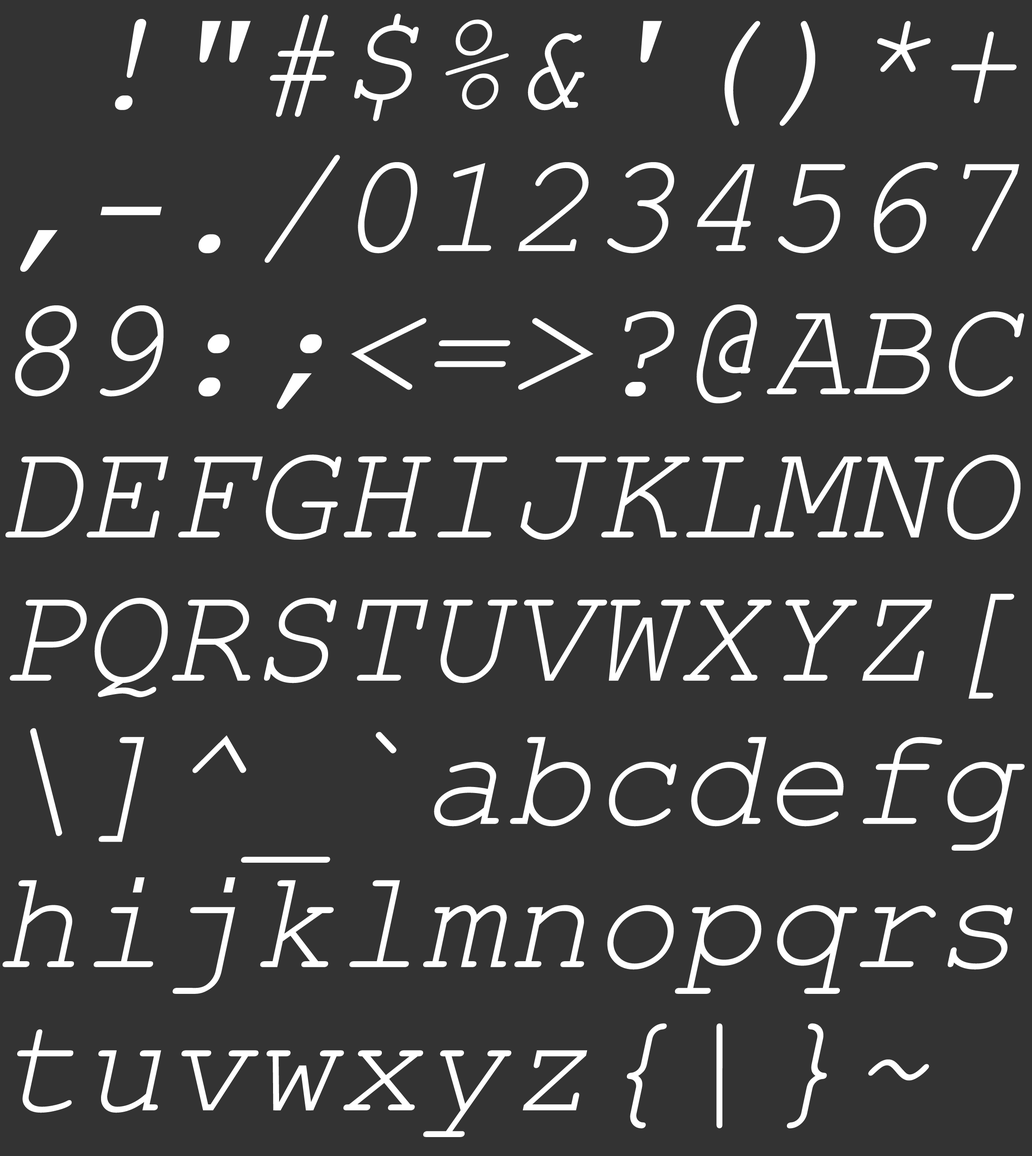
<style>
.page{position:relative;width:1032px;height:1156px;background:#333333}
.page>*{position:absolute;margin:0}
.t1{font:141.6px/143.2px "CourierNewPS-ItalicMT";letter-spacing:0.002em;color:#ffffff}
</style>
<div class="page">
<p class="t1" style="left:3px;top:13px;width:1022px;height:1124px">!"#$%&amp;'()*+<br>,-./01234567<br>89:;&lt;=&gt;?@ABC<br>DEFGHIJKLMNO<br>PQRSTUVWXYZ[<br>\]^_`abcdefg<br>hijklmnopqrs<br>tuvwxyz{|}~</p>
</div>
